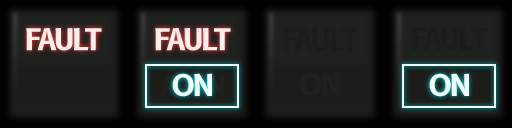
<style>
.page{position:relative;width:512px;height:128px}
.page>*{position:absolute;margin:0}
.t1{font:29.2px "B612-Bold";letter-spacing:-0.075em;color:#1c1d19}
.t2{font:29.2px "B612-Bold";letter-spacing:-0.075em;color:#1f211e}
</style>
<div class="page">
<p class="t1" style="left:283px;top:28px;width:76px;height:23px">FAULT</p>
<p class="t1" style="left:412px;top:27px;width:76px;height:23px">FAULT</p>
<p class="t2" style="left:300px;top:73px;width:40px;height:23px">ON</p>
</div>
